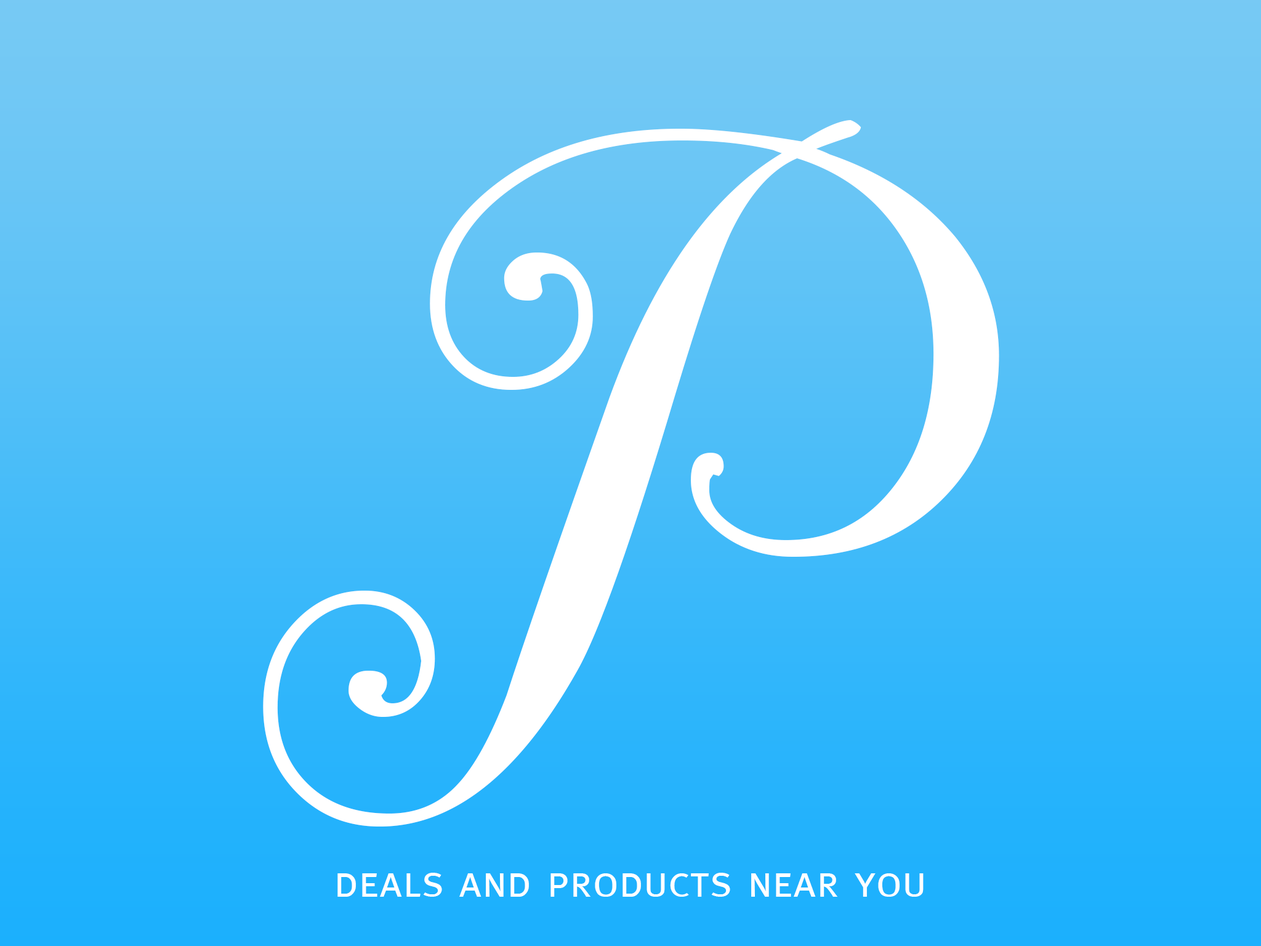
<style>
.page{position:relative;width:1261px;height:946px}
.page>*{position:absolute;margin:0}
.t1{font:797.9px "BodoniSvtyTwoSwaITCTTBookIt";color:#ffffff}
.t2{font:44.3px "Meta-Caps";color:#ffffff}
</style>
<div class="page">
<p class="t1" style="left:263px;top:120px;width:736px;height:706px">P</p>
<p class="t2" style="left:337px;top:872px;width:587px;height:24px">deals and products near you</p>
</div>
